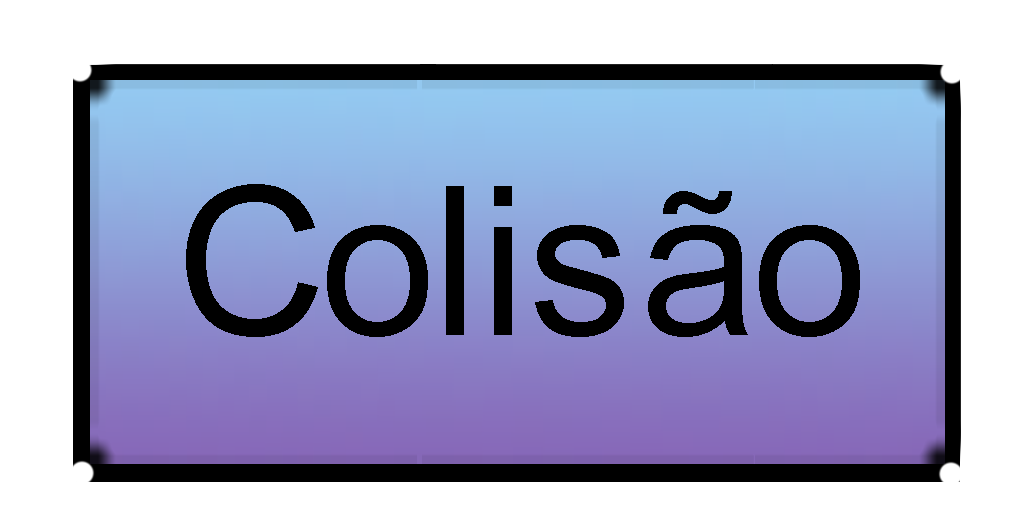
<style>
.page{position:relative;width:1024px;height:512px;background:#ffffff}
.page>*{position:absolute;margin:0}
.t1{font:208px "ArialMT";color:#000000}
</style>
<div class="page">
<p class="t1" style="left:186px;top:184px;width:674px;height:153px">Colisão</p>
</div>
